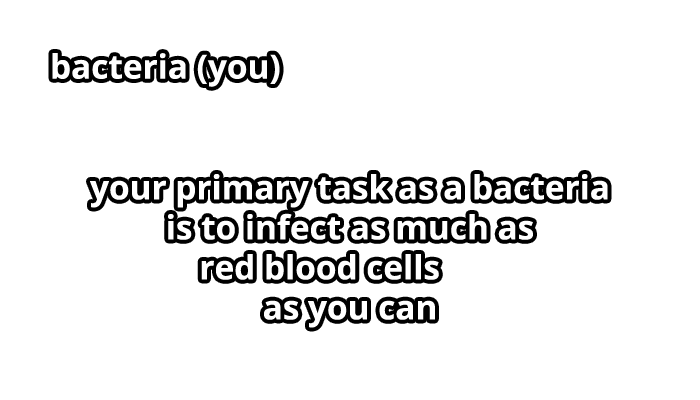
<style>
.page{position:relative;width:700px;height:400px;background:#ffffff}
.page>*{position:absolute;margin:0}
.t1{font:33.3px "OpenSans-Bold";color:#ffffff}
</style>
<div class="page">
<p class="t1" style="left:52px;top:53px;width:228px;height:34px">bacteria (you)</p>
<p class="t1" style="left:90px;top:174px;width:518px;height:154px;text-align:center">your primary task as a bacteria<br>is to infect as much as<br>red blood cells       <br>as you can</p>
</div>
